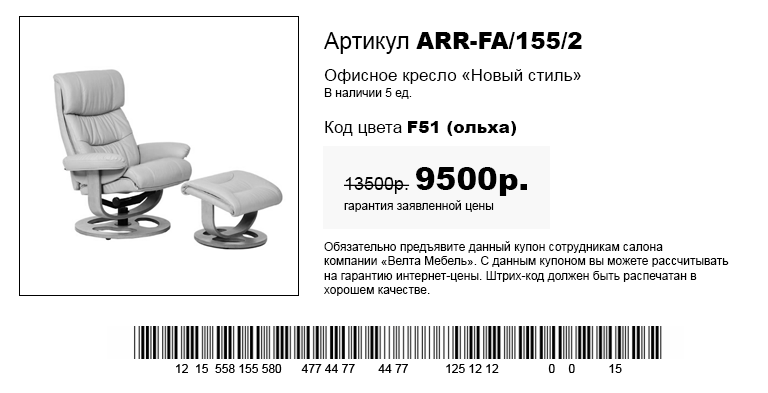
<style>
.page{position:relative;width:768px;height:393px;background:#ffffff}
.page>*{position:absolute;margin:0}
.t1{font:23px "Arial-Black";color:#000000}
.t2{font:23px "ArialMT";color:#000000}
.t3{font:17px "ArialMT";color:#000000}
.t4{font:12px "ArialMT";color:#000000}
.t5{font:17px "Arial-Black";color:#000000}
.t6{font:12px/20px "ArialMT";color:#000000}
.t7{font:18px/20px "ArialMT";color:#000000}
.t8{font:31px/20px "Arial-Black";color:#000000}
</style>
<div class="page">
<p class="t1" style="left:324px;top:32px;width:258px;height:22px"><span class="t2">Артикул </span>ARR-FA/155/2</p>
<p class="t3" style="left:324px;top:69px;width:257px;height:15px">Офисное кресло «Новый стиль»</p>
<p class="t4" style="left:324px;top:88px;width:88px;height:11px">В наличии 5 ед.</p>
<p class="t5" style="left:325px;top:121px;width:191px;height:15px"><span class="t3">Код цвета </span>F51 (ольха)</p>
<p class="t6" style="left:344px;top:167px;width:183px;height:45px"><span class="t7">13500р. </span><span class="t8">9500р.<br></span>гарантия заявленной цены</p>
<p class="t4" style="left:324px;top:241px;width:405px;height:55px">Обязательно предъявите данный купон сотрудникам салона<br>компании «Велта Мебель». С данным купоном вы можете рассчитывать <br>на гарантию интернет-цены. Штрих-код должен быть распечатан в <br>хорошем качестве.</p>
</div>
